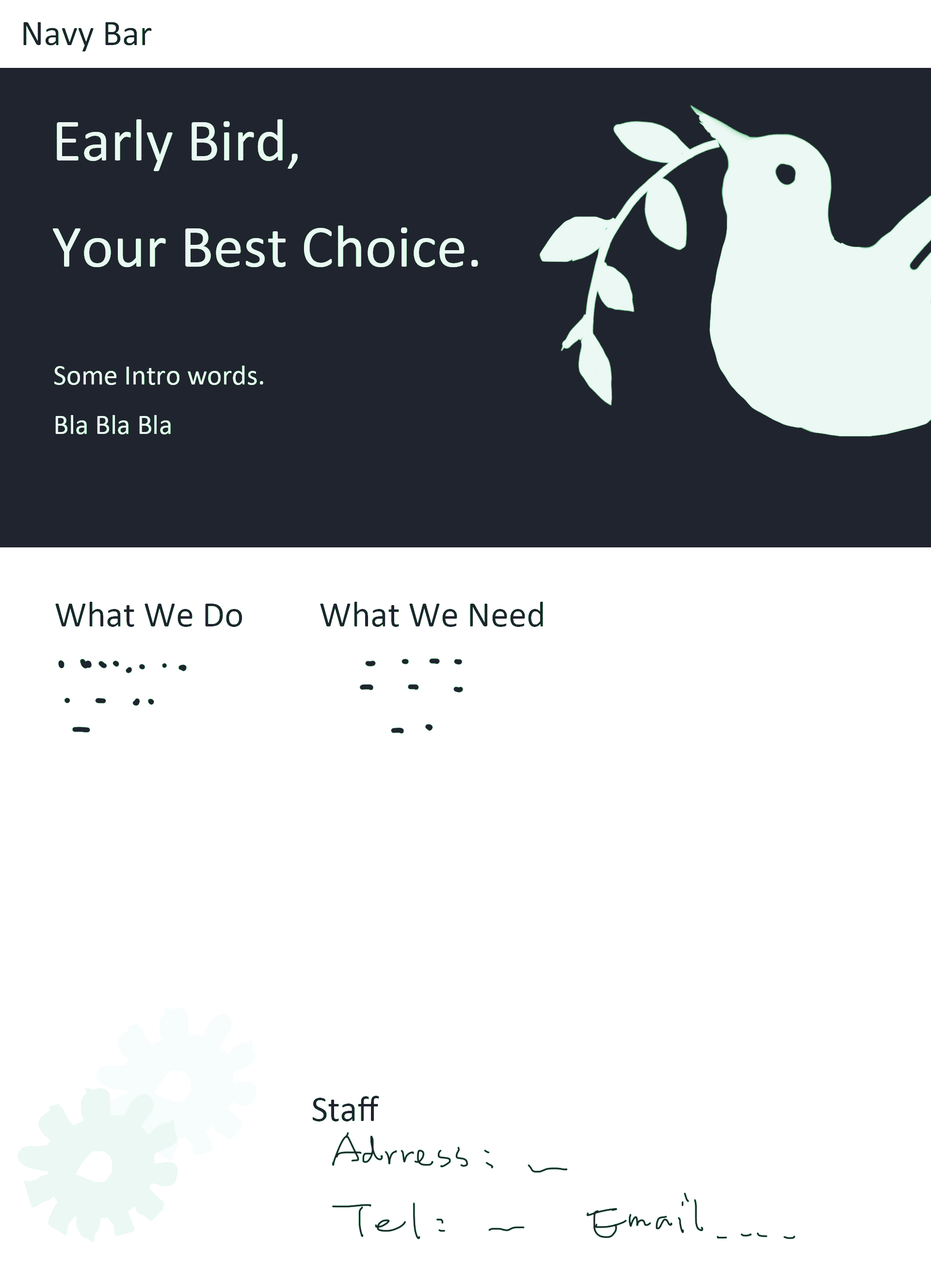
<style>
.page{position:relative;width:931px;height:1280px;background:#ffffff}
.page>*{position:absolute;margin:0}
.t1{font:36.4px "Calibri";color:#20242e}
.t2{font:60.6px "Calibri";color:#ebf8f3}
.t3{font:28.3px "Calibri";color:#ebf8f3}
</style>
<div class="page">
<p class="t1" style="left:23px;top:22px;width:129px;height:30px">Navy Bar</p>
<p class="t2" style="left:52px;top:119px;width:426px;height:148px">Early Bird, <br>Your Best Choice.</p>
<p class="t3" style="left:54px;top:366px;width:209px;height:69px">Some Intro words.<br>Bla Bla Bla</p>
<p class="t1" style="left:55px;top:602px;width:188px;height:25px">What We Do</p>
<p class="t1" style="left:320px;top:602px;width:223px;height:25px">What We Need</p>
<p class="t1" style="left:312px;top:1096px;width:67px;height:26px">Staff</p>
</div>
